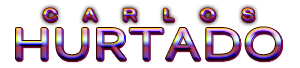
<style>
.page{position:relative;width:300px;height:68px;background:#ffffff}
.page>*{position:absolute;margin:0}
.t1{font:15.6px "MicrosoftSansSerif";letter-spacing:1.4em;font-weight:bold;scale:1.2 1}
.t2{font:43.6px "RealistWide-Regular";letter-spacing:0.075em;font-weight:bold}
</style>
<div class="page">
<p class="t1" style="left:43px;top:8px;width:211px;height:13px">CARLOS</p>
<p class="t1" style="left:44px;top:9px;width:211px;height:13px">CARLOS</p>
<p class="t2" style="left:16px;top:27px;width:265px;height:33px">HURTADO</p>
<p class="t2" style="left:17px;top:28px;width:265px;height:33px">HURTADO</p>
<p class="t2" style="left:17px;top:28px;width:265px;height:33px">HURTADO</p>
</div>
